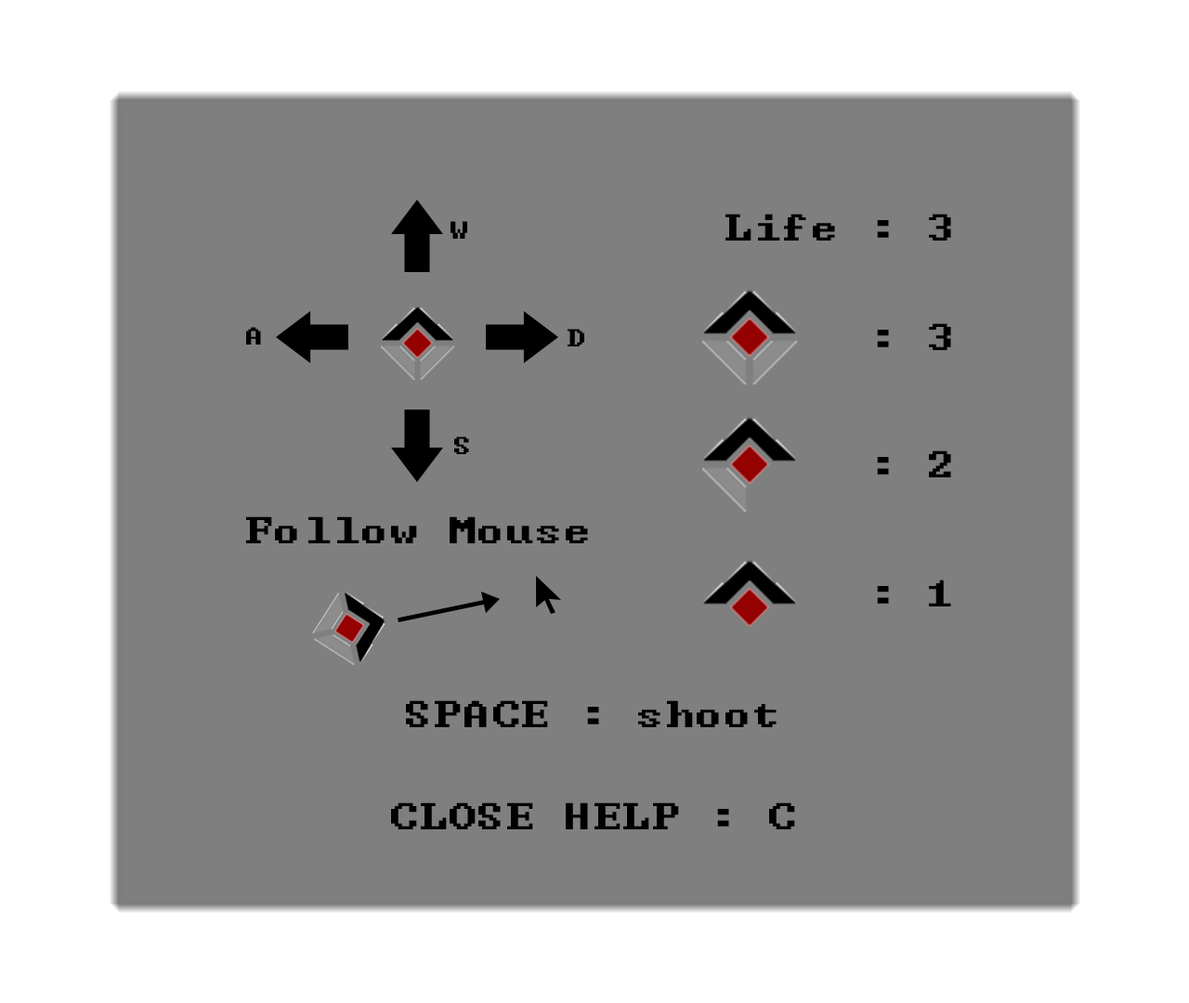
<style>
.page{position:relative;width:1189px;height:1003px;background:#7f7f7f}
.page>*{position:absolute;margin:0}
.t1{font:30.7px "Terminal";color:#000000}
.t2{font:46.4px "Terminal";color:#000000}
</style>
<div class="page">
<p class="t1" style="left:450px;top:221px;width:17px;height:18px">W</p>
<p class="t2" style="left:725px;top:214px;width:226px;height:27px">Life : 3</p>
<p class="t1" style="left:246px;top:327px;width:15px;height:18px">A</p>
<p class="t1" style="left:567px;top:329px;width:17px;height:17px">D</p>
<p class="t2" style="left:877px;top:323px;width:74px;height:27px">: 3</p>
<p class="t1" style="left:454px;top:437px;width:15px;height:17px">S</p>
<p class="t2" style="left:877px;top:450px;width:74px;height:27px">: 2</p>
<p class="t2" style="left:246px;top:516px;width:342px;height:27px">Follow Mouse</p>
<p class="t2" style="left:877px;top:580px;width:74px;height:26px">: 1</p>
<p class="t2" style="left:406px;top:700px;width:370px;height:27px">SPACE : shoot</p>
<p class="t2" style="left:391px;top:802px;width:404px;height:27px">CLOSE HELP : C</p>
</div>
